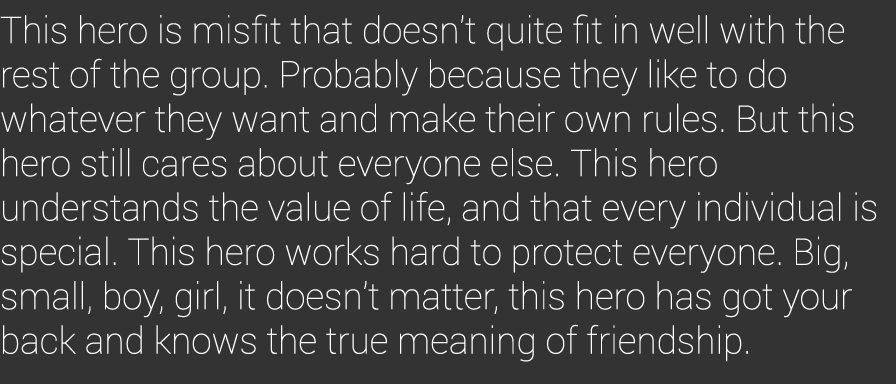
<style>
.page{position:relative;width:896px;height:384px;background:#333333}
.page>*{position:absolute;margin:0}
.t1{font:36.9px "Roboto-Thin";color:#ffffff}
</style>
<div class="page">
<p class="t1" style="left:0px;top:14px;width:877px;height:348px">This hero is misfit that doesn’t quite fit in well with the rest of the group. Probably because they like to do <br>whatever they want and make their own rules. But this hero still cares about everyone else. This hero <br>understands the value of life, and that every individual is special. This hero works hard to protect everyone. Big, small, boy, girl, it doesn’t matter, this hero has got your back and knows the true meaning of friendship.</p>
</div>
